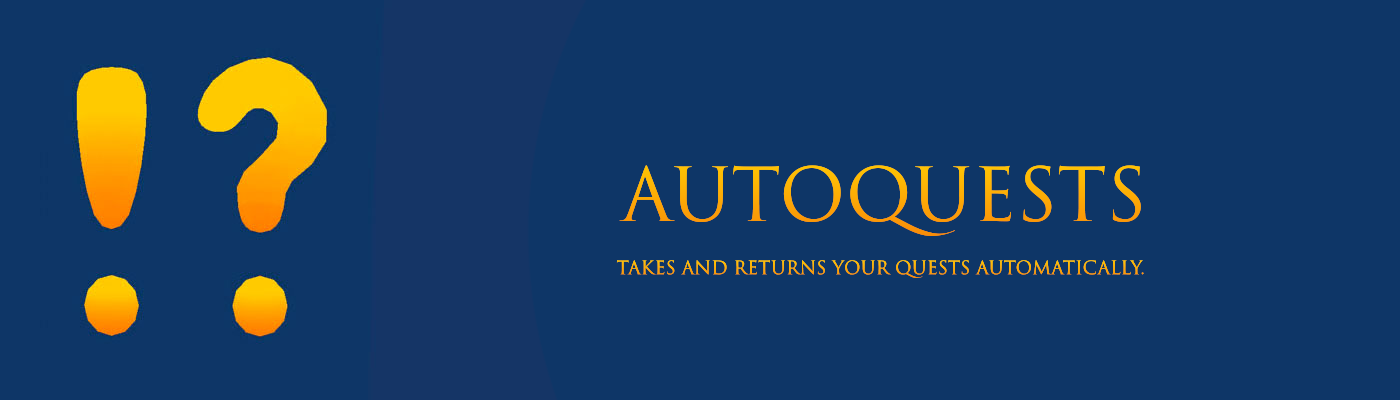
<style>
.page{position:relative;width:1400px;height:400px;background:#0e3667}
.page>*{position:absolute;margin:0}
.t1{font:72px "TrajanColor-Concept";color:#fdae05}
.t2{font:18px "TrajanColor-Concept";color:#fcae05}
</style>
<div class="page">
<p class="t1" style="left:619px;top:165px;width:522px;height:71px">AutoQuests</p>
<p class="t2" style="left:616px;top:260px;width:528px;height:18px">Takes and returns your quests automatically.</p>
</div>
